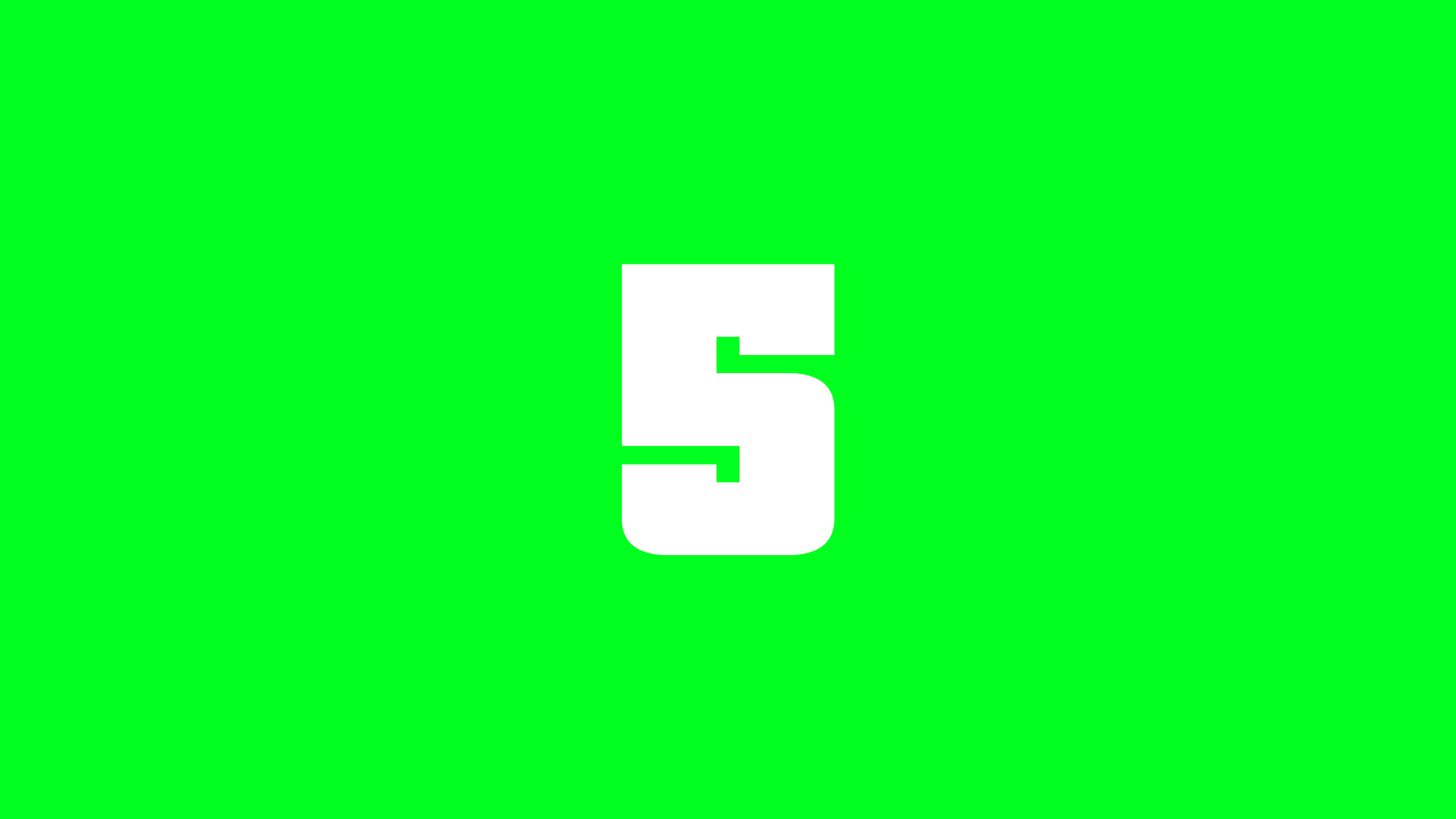
<style>
.page{position:relative;width:1456px;height:819px;background:#00ff1e}
.page>*{position:absolute;margin:0}
.t1{font:455px "PricedownBl-Regular";color:#ffffff}
</style>
<div class="page">
<p class="t1" style="left:621px;top:264px;width:213px;height:291px">3</p>
<p class="t1" style="left:622px;top:264px;width:213px;height:291px">5</p>
</div>
